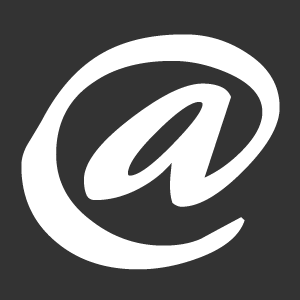
<style>
.page{position:relative;width:300px;height:300px;background:#333333}
.page>*{position:absolute;margin:0}
.t1{font:302px "ARBERKLEY";color:#ffffff}
</style>
<div class="page">
<p class="t1" style="left:21px;top:34px;width:259px;height:236px">@</p>
</div>
